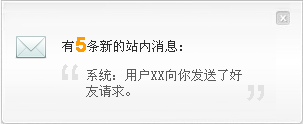
<style>
.page{position:relative;width:303px;height:124px}
.page>*{position:absolute;margin:0}
.t1{font:13.3px "SimSun";color:#2c2c2c}
.t2{font:16px "SimSun";color:#2c2c2c}
.t3{font:18.7px "ArialMT";color:#ff9c01;font-weight:bold}
.t4{font:66.7px "ArialMT";color:#e2e2e2}
.t5{font:13.3px "SimSun";color:#5c5c5c}
</style>
<div class="page">
<p class="t1" style="left:62px;top:37px;width:120px;height:15px"><span class="t2"> </span>有<span class="t3">5</span>条新的站内消息:</p>
<p class="t4" style="left:62px;top:64px;width:16px;height:16px">“</p>
<p class="t5" style="left:86px;top:69px;width:156px;height:28px">系统：用户XX向你发送了好<br>友请求。</p>
<p class="t4" style="left:247px;top:85px;width:17px;height:16px">”</p>
</div>
